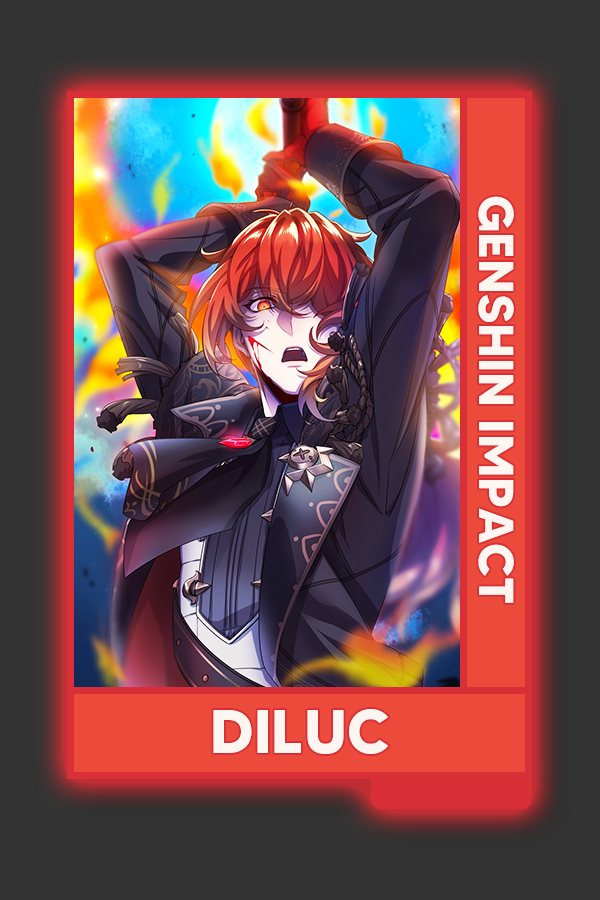
<style>
.page{position:relative;width:600px;height:900px;background:#333333}
.page>*{position:absolute;margin:0}
.t1{font:48.8px "MADETOMMY-Bold";color:#ffeee7}
.t2{font:61.5px "MADETOMMY-Bold";color:#ffeee7}
</style>
<div class="page">
<p class="t1" style="left:478px;top:196px;width:36px;height:407px;rotate:90deg">GENSHIN IMPACT</p>
<p class="t2" style="left:213px;top:709px;width:176px;height:45px">DILUC</p>
</div>
